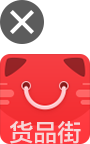
<style>
.page{position:relative;width:90px;height:144px;background:#ffffff}
.page>*{position:absolute;margin:0}
.t1{font:24px "FZLTZHK--GBK1-0";color:#f6d5d6}
</style>
<div class="page">
<p class="t1" style="left:10px;top:121px;width:71px;height:23px">货品街</p>
</div>
